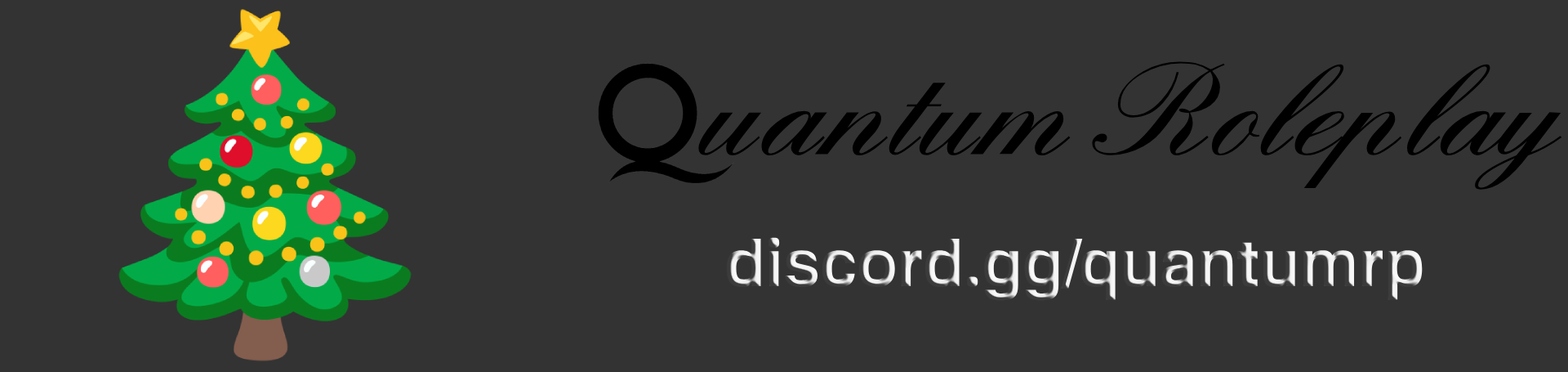
<style>
.page{position:relative;width:1568px;height:372px;background:#333333}
.page>*{position:absolute;margin:0}
.t1{font:133.6px "EnglandHandDB";color:#000000}
.t2{font:66.2px "FamiliarPro-Bold"}
</style>
<div class="page">
<p class="t1" style="left:698px;top:61px;width:864px;height:128px">uantum Roleplay</p>
<p class="t2" style="left:726px;top:237px;width:697px;height:64px">discord.gg/quantumrp</p>
</div>
